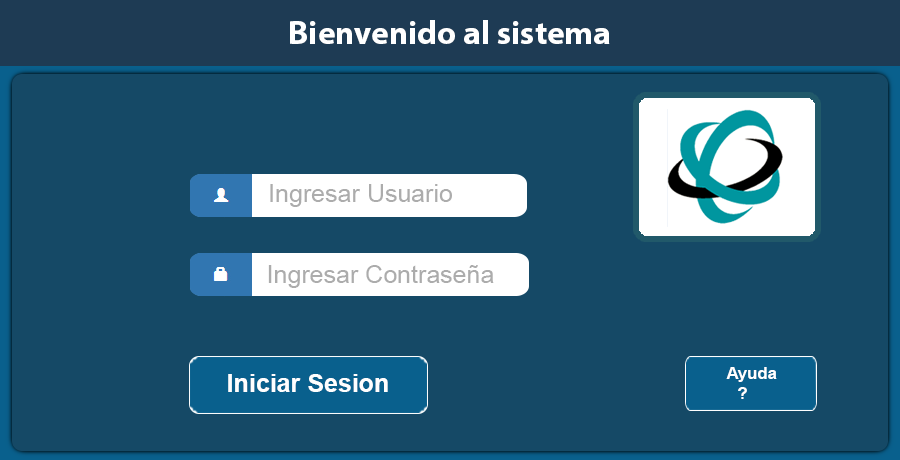
<style>
.page{position:relative;width:900px;height:460px;background:#154966}
.page>*{position:absolute;margin:0}
.t1{font:33.2px "MyriadPro-Bold";color:#ffffff}
.t2{font:25px "ArialMT";color:#acacac}
.t3{font:25px "Arial-BoldMT";color:#ffffff}
.t4{font:16.7px "Arial-BoldMT";color:#ffffff}
.t5{font:25px "ArialMT";color:#192f24}
</style>
<div class="page">
<p class="t1" style="left:290px;top:20px;width:320px;height:24px">Bienvenido al sistema</p>
<p class="t2" style="left:270px;top:184px;width:182px;height:23px">Ingresar Usuario</p>
<p class="t2" style="left:268px;top:265px;width:226px;height:23px">Ingresar Contraseña</p>
<p class="t3" style="left:228px;top:374px;width:160px;height:18px">Iniciar Sesion</p>
<p class="t4" style="left:726px;top:367px;width:51px;height:32px;text-align:center"><span class="t5">    </span>Ayuda <br> ?</p>
</div>
